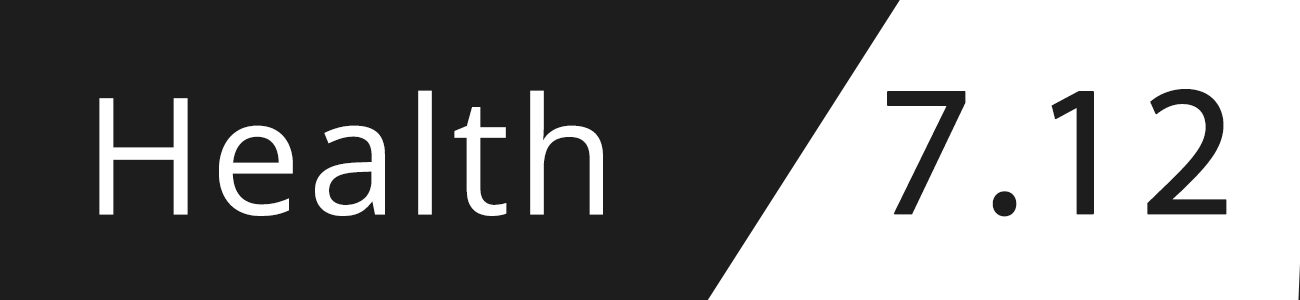
<style>
.page{position:relative;width:1300px;height:300px;background:#1d1d1d}
.page>*{position:absolute;margin:0}
.t1{font:187.5px "MyriadPro-Regular";letter-spacing:0.04em;color:#1d1d1d;font-weight:bold}
.t2{font:162.5px "OpenSans-Regular";letter-spacing:0.04em;color:#ffffff;font-weight:bold}
</style>
<div class="page">
<p class="t1" style="left:887px;top:89px;width:340px;height:128px">7.12</p>
<p class="t2" style="left:99px;top:90px;width:504px;height:126px">Health</p>
</div>
